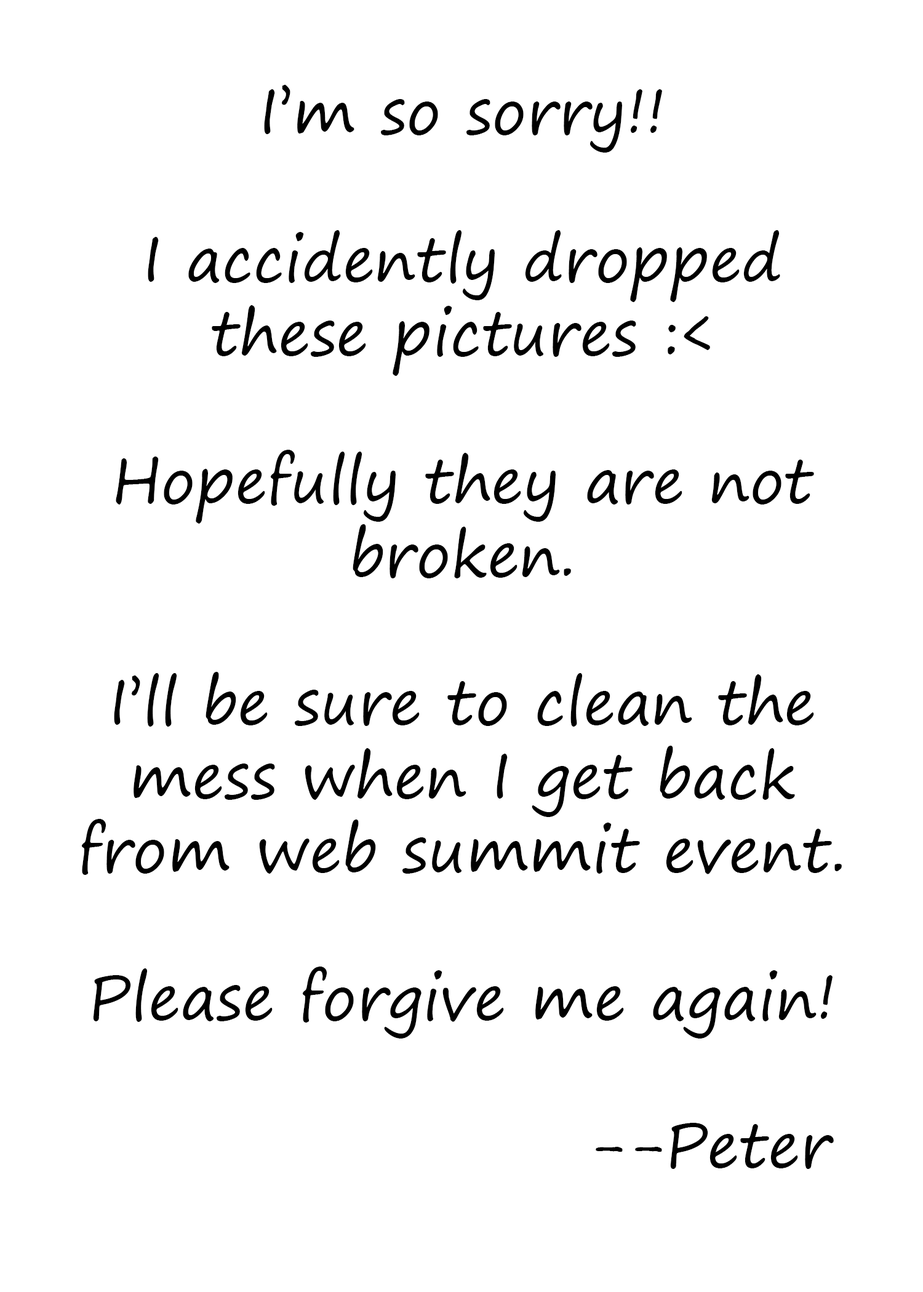
<style>
.page{position:relative;width:923px;height:1292px;background:#ffffff}
.page>*{position:absolute;margin:0}
.t1{font:61.5px "SegoePrint";color:#000000}
</style>
<div class="page">
<p class="t1" style="left:81px;top:84px;width:761px;height:1085px;text-align:center">I’m so sorry!!<br><br>I accidently dropped these pictures :&lt;<br><br>Hopefully they are not broken.<br><br>I’ll be sure to clean the mess when I get back from web summit event.<br><br>Please forgive me again!<br>               <br>                    --Peter</p>
</div>
